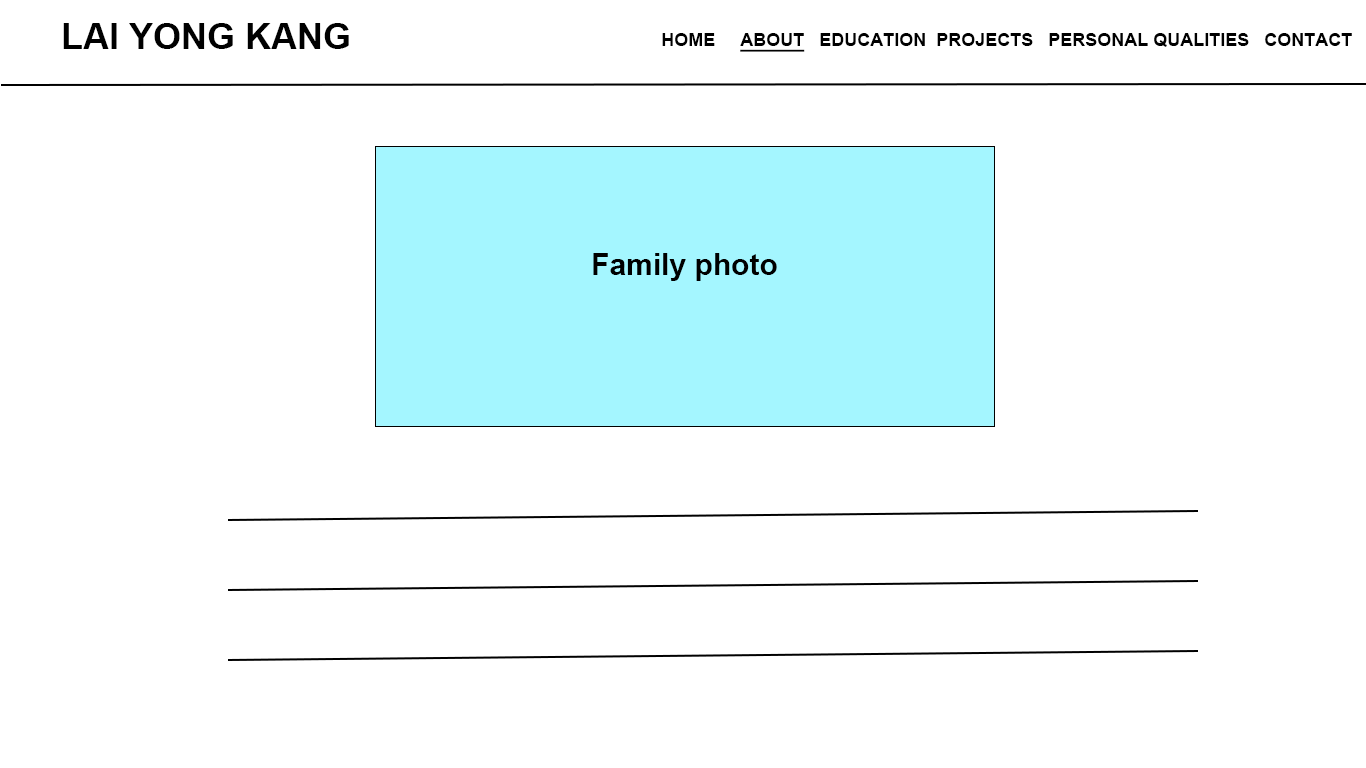
<style>
.page{position:relative;width:1366px;height:768px;background:#ffffff}
.page>*{position:absolute;margin:0}
.t1{font:36px "Arial-BoldMT";color:#000000}
.t2{font:18px "Arial-BoldMT";color:#000000}
.t3{font:18px "Arial-BoldMT";color:#000000;text-decoration:underline}
.t4{font:30px "Arial-BoldMT";color:#000000}
.t5{font:30px "Arial-BoldMT";color:#00ccff}
</style>
<div class="page">
<p class="t1" style="left:63px;top:23px;width:286px;height:26px">LAI YONG KANG</p>
<p class="t2" style="left:662px;top:33px;width:690px;height:19px">HOME     <span class="t3">ABOUT</span>   EDUCATION  PROJECTS   PERSONAL QUALITIES   CONTACT</p>
<p class="t4" style="left:593px;top:253px;width:184px;height:28px"><span class="t5"><br><br><br></span>Family photo</p>
</div>
